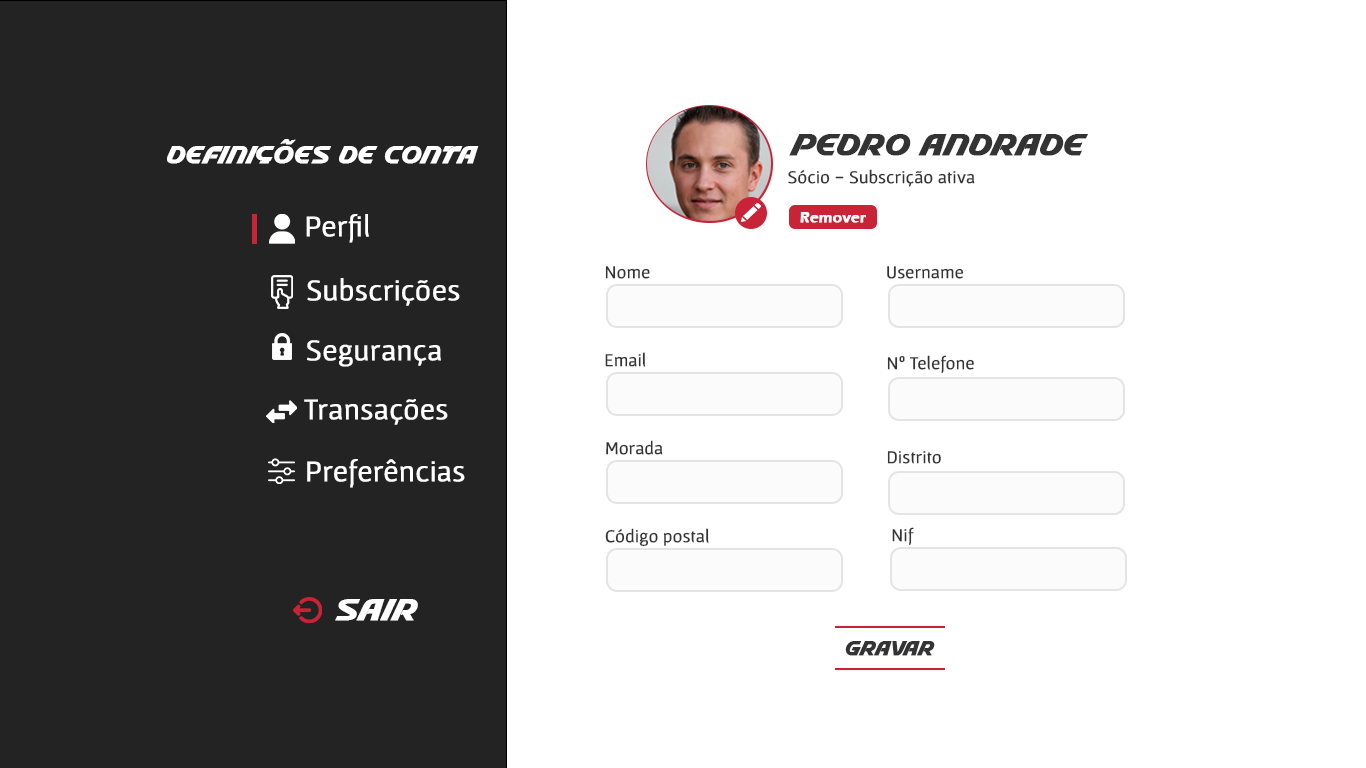
<style>
.page{position:relative;width:1366px;height:768px;background:#ffffff}
.page>*{position:absolute;margin:0}
.t1{font:30px "Stable";color:#333333;font-weight:bold}
.t2{font:24px "Stable";color:#ffffff;font-weight:bold}
.t3{font:17.9px "Gafata-Regular";color:#333333;font-weight:bold}
.t4{font:30px "Gafata-Regular";color:#ffffff;font-weight:bold}
.t5{font:15.1px "ErasITC-Demi";color:#ffffff;font-weight:bold}
.t6{font:30px "Stable";color:#ffffff;font-weight:bold}
.t7{font:18.8px "Stable";color:#333333;font-weight:bold}
</style>
<div class="page">
<p class="t1" style="left:789px;top:134px;width:299px;height:22px">Pedro Andrade</p>
<p class="t2" style="left:167px;top:139px;width:312px;height:25px">Definições de conta</p>
<p class="t3" style="left:788px;top:169px;width:187px;height:18px">Sócio - Subscrição ativa</p>
<p class="t4" style="left:306px;top:214px;width:63px;height:29px">Perfil</p>
<p class="t5" style="left:800px;top:212px;width:66px;height:11px">Remover</p>
<p class="t3" style="left:605px;top:266px;width:45px;height:13px">Nome</p>
<p class="t3" style="left:887px;top:266px;width:77px;height:13px">Username</p>
<p class="t4" style="left:307px;top:278px;width:153px;height:28px">Subscrições</p>
<p class="t4" style="left:307px;top:340px;width:134px;height:27px">Segurança</p>
<p class="t3" style="left:605px;top:352px;width:41px;height:15px">Email</p>
<p class="t3" style="left:887px;top:355px;width:87px;height:18px">Nº Telefone</p>
<p class="t4" style="left:304px;top:399px;width:144px;height:26px">Transações</p>
<p class="t3" style="left:606px;top:440px;width:57px;height:15px">Morada</p>
<p class="t4" style="left:307px;top:459px;width:158px;height:29px">Preferências</p>
<p class="t3" style="left:887px;top:451px;width:54px;height:13px">Distrito</p>
<p class="t3" style="left:605px;top:528px;width:104px;height:19px">Código postal</p>
<p class="t3" style="left:892px;top:527px;width:22px;height:18px">Nif</p>
<p class="t6" style="left:335px;top:599px;width:83px;height:22px">Sair</p>
<p class="t7" style="left:845px;top:641px;width:90px;height:15px">Gravar</p>
</div>
